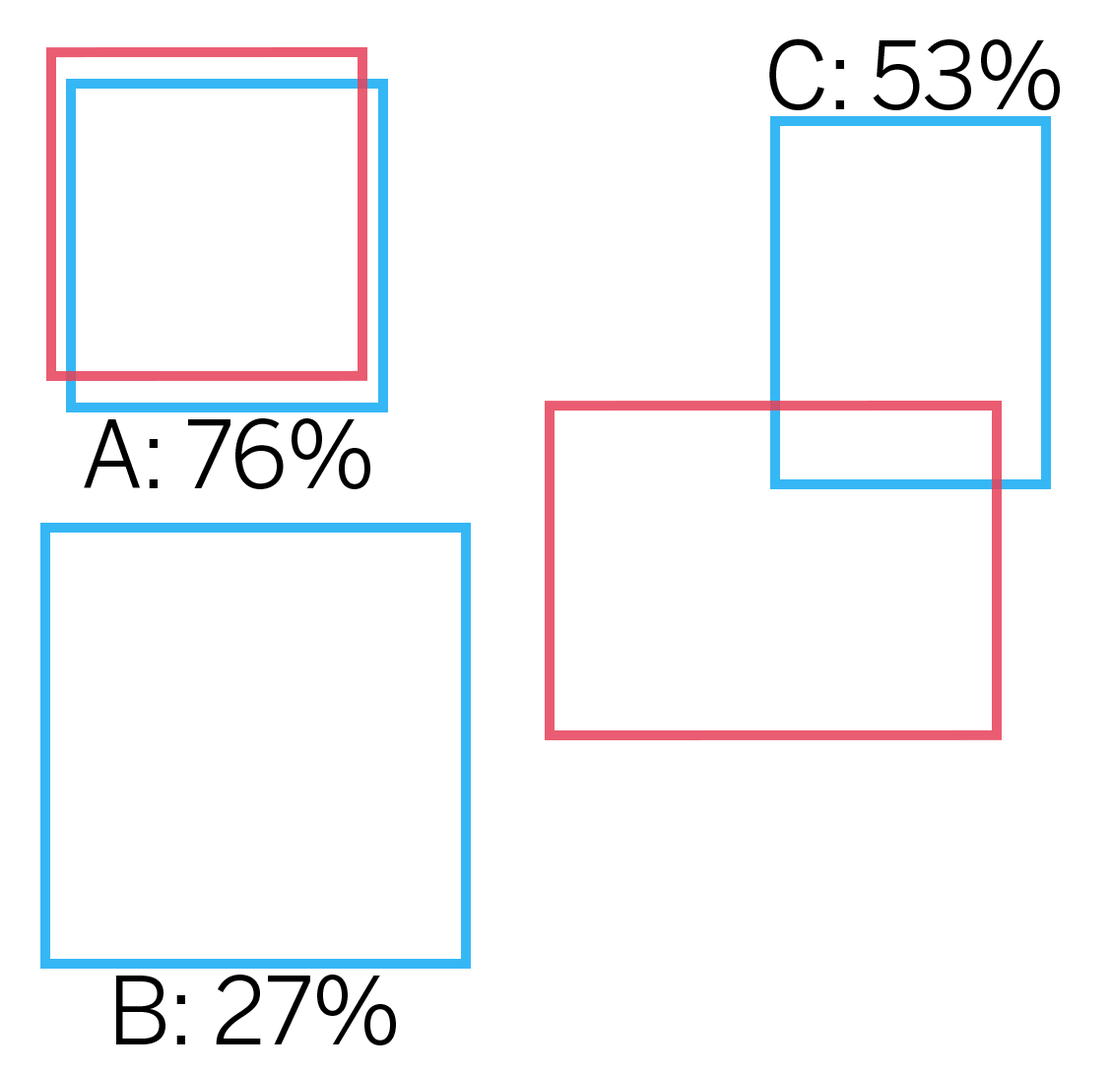
<style>
.page{position:relative;width:1112px;height:1072px;background:#ffffff}
.page>*{position:absolute;margin:0}
.t1{font:93.1px "BentonSans-Book";letter-spacing:-0.02em;color:#000000}
</style>
<div class="page">
<p class="t1" style="left:769px;top:38px;width:291px;height:72px">C: 53%</p>
<p class="t1" style="left:84px;top:419px;width:286px;height:70px">A: 76%</p>
<p class="t1" style="left:116px;top:975px;width:280px;height:71px">B: 27%</p>
</div>
